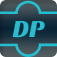
<style>
.page{position:relative;width:57px;height:57px}
.page>*{position:absolute;margin:0}
.t1{font:24px "SansitaOne";color:#21bfd0}
</style>
<div class="page">
<p class="t1" style="left:12px;top:20px;width:33px;height:18px">DP</p>
</div>
